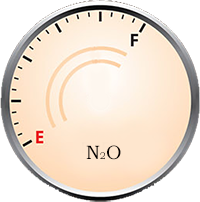
<style>
.page{position:relative;width:200px;height:202px;background:#ffffff}
.page>*{position:absolute;margin:0}
.t1{font:19.6px "BookmanOldStyle";color:#030000}
.t2{font:9.8px "BookmanOldStyle";color:#030000}
</style>
<div class="page">
<p class="t1" style="left:86px;top:145px;width:35px;height:15px">N<span class="t2">2</span>O</p>
</div>
